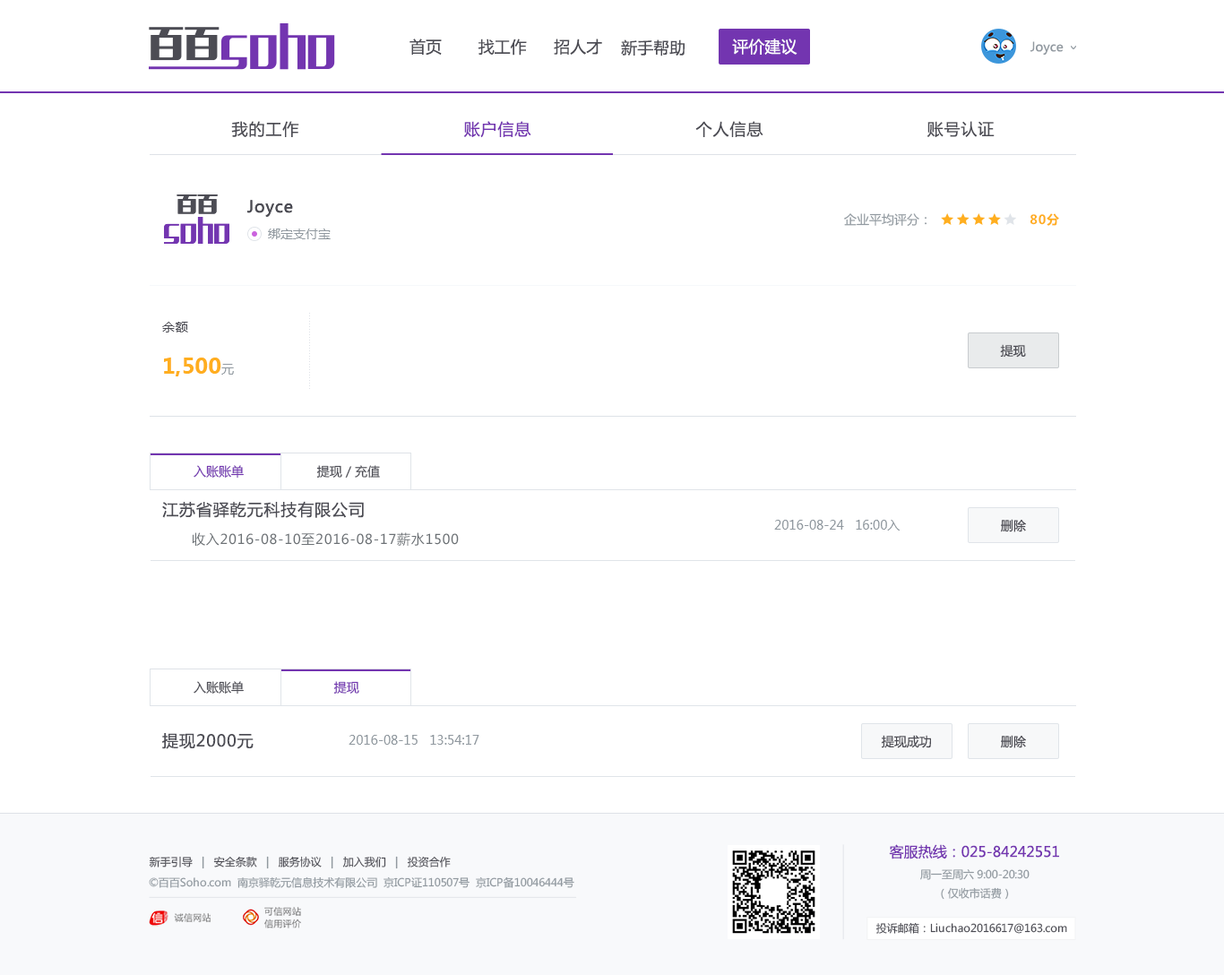
<style>
.page{position:relative;width:1224px;height:975px;background:#ffffff}
.page>*{position:absolute;margin:0}
.t1{font:16.1px "MicrosoftYaHei";color:#4c4c54}
.t2{font:16.1px "MicrosoftYaHei";color:#ffffff}
.t3{font:12.5px "MicrosoftYaHei";color:#9199a0}
.t4{font:16.1px "MicrosoftYaHei";letter-spacing:0.05em;color:#4c4c54}
.t5{font:16.1px "MicrosoftYaHei";letter-spacing:0.05em;color:#7335b0}
.t6{font:12.5px "MicrosoftYaHei-Bold";letter-spacing:0.05em;color:#ffae1f}
.t7{font:5.4px "SimSun";color:#dee2e7}
.t8{font:12.5px "MicrosoftYaHei";letter-spacing:0.05em;color:#4c4c54}
.t9{font:12.5px "MicrosoftYaHei";color:#4c4c54}
.t10{font:21.5px "MicrosoftYaHei-Bold";color:#ffae1f}
.t11{font:12.5px "MicrosoftYaHei";color:#7335b0}
.t12{font:13.4px "MicrosoftYaHei";letter-spacing:0.05em;color:#6c7175}
.t13{font:14.3px "MicrosoftYaHei";color:#7335b0}
.t14{font:10.7px "MicrosoftYaHei";color:#4c4c54}
.t15{font:10.7px "MicrosoftYaHei";color:#9199a0}
.t16{font:10.7px/18.5px "MicrosoftYaHei";color:#9199a0}
</style>
<div class="page">
<p class="t1" style="left:409px;top:39px;width:33px;height:17px">首页</p>
<p class="t1" style="left:477px;top:39px;width:50px;height:17px">找工作</p>
<p class="t1" style="left:554px;top:39px;width:48px;height:16px">招人才</p>
<p class="t1" style="left:621px;top:39px;width:63px;height:17px">新手帮助</p>
<p class="t2" style="left:732px;top:39px;width:65px;height:16px">评价建议</p>
<p class="t3" style="left:1030px;top:41px;width:33px;height:14px">Joyce</p>
<p class="t4" style="left:231px;top:121px;width:68px;height:16px">我的工作</p>
<p class="t5" style="left:463px;top:121px;width:68px;height:17px">账户信息</p>
<p class="t4" style="left:695px;top:121px;width:68px;height:16px">个人信息</p>
<p class="t4" style="left:926px;top:121px;width:68px;height:16px">账号认证</p>
<p class="t4" style="left:247px;top:200px;width:46px;height:17px">Joyce</p>
<p class="t4" style="left:247px;top:200px;width:46px;height:17px">Joyce</p>
<p class="t3" style="left:844px;top:213px;width:83px;height:13px">企业平均评分：</p>
<p class="t6" style="left:1029px;top:213px;width:30px;height:13px">80分</p>
<p class="t3" style="left:268px;top:228px;width:63px;height:11px">绑定支付宝</p>
<p class="t7" style="left:309px;top:313px;width:1px;height:76px;rotate:90deg">.............................</p>
<p class="t8" style="left:162px;top:322px;width:26px;height:10px">余额</p>
<p class="t9" style="left:1000px;top:344px;width:26px;height:13px">提现</p>
<p class="t10" style="left:164px;top:357px;width:70px;height:19px">1,500<span class="t3">元</span></p>
<p class="t11" style="left:193px;top:465px;width:51px;height:13px">入账账单</p>
<p class="t9" style="left:316px;top:465px;width:64px;height:12px">提现 / 充值</p>
<p class="t4" style="left:162px;top:501px;width:202px;height:17px">江苏省驿乾元科技有限公司</p>
<p class="t3" style="left:774px;top:520px;width:125px;height:10px">2016-08-24   16:00入</p>
<p class="t9" style="left:1001px;top:519px;width:25px;height:13px">删除</p>
<p class="t12" style="left:192px;top:532px;width:267px;height:13px">收入2016-08-10至2016-08-17薪水1500</p>
<p class="t9" style="left:193px;top:681px;width:51px;height:13px">入账账单</p>
<p class="t11" style="left:333px;top:681px;width:26px;height:12px">提现</p>
<p class="t4" style="left:162px;top:733px;width:91px;height:16px">提现2000元</p>
<p class="t3" style="left:348px;top:734px;width:131px;height:10px">2016-08-15   13:54:17</p>
<p class="t9" style="left:881px;top:734px;width:50px;height:14px">提现成功</p>
<p class="t9" style="left:1001px;top:734px;width:25px;height:14px">删除</p>
<p class="t13" style="left:889px;top:844px;width:170px;height:15px">客服热线：025-84242551</p>
<p class="t14" style="left:149px;top:855px;width:302px;height:14px">新手引导  <span class="t15"> |   </span>安全条款  <span class="t15"> |   </span>服务协议  <span class="t15"> |   </span>加入我们  <span class="t15"> |   </span>投资合作</p>
<p class="t16" style="left:920px;top:869px;width:109px;height:30px;text-align:center">周一至周六 9:00-20:30<br>（仅收市话费）</p>
<p class="t15" style="left:149px;top:876px;width:425px;height:12px">©百百Soho.com  南京驿乾元信息技术有限公司  京ICP证110507号  京ICP备10046444号</p>
<p class="t14" style="left:875px;top:922px;width:192px;height:11px">投诉邮箱：Liuchao2016617@163.com</p>
</div>
